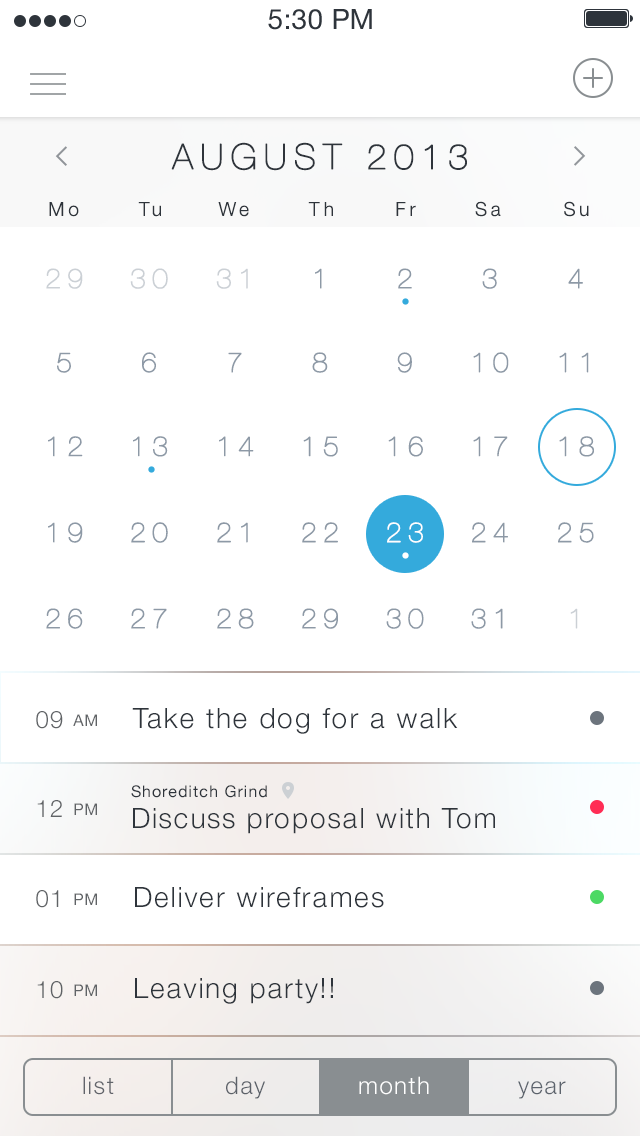
<style>
.page{position:relative;width:640px;height:1136px;background:#ffffff}
.page>*{position:absolute;margin:0}
.t1{font:35px "HelveticaNeue-UltraLight";letter-spacing:0.205em;color:#2e343b;text-transform:uppercase;font-weight:bold}
.t2{font:19.3px "HelveticaNeue-Light";letter-spacing:0.205em;color:#2e343b;text-transform:uppercase}
.t3{font:19.3px "HelveticaNeue-Light";letter-spacing:0.205em;color:#2e343b}
.t4{font:27.6px "HelveticaNeue-UltraLight";letter-spacing:0.205em;color:#cbd0d5;text-transform:uppercase;font-weight:bold}
.t5{font:27.6px "HelveticaNeue-UltraLight";letter-spacing:0.205em;color:#8d99a6;text-transform:uppercase;font-weight:bold}
.t6{font:27.6px "HelveticaNeue-UltraLight";letter-spacing:0.205em;color:#ffffff;text-transform:uppercase;font-weight:bold}
.t7{font:24px "HelveticaNeue-Light";letter-spacing:0.065em;color:#606366}
.t8{font:16px "HelveticaNeue";letter-spacing:0.065em;color:#606366;text-transform:uppercase}
.t9{font:28px "HelveticaNeue-Light";letter-spacing:0.065em;color:#2e343b}
.t10{font:16px "HelveticaNeue";letter-spacing:0.065em;color:#2e343b}
.t11{font:24px "HelveticaNeue-Light";letter-spacing:0.065em;color:#6c747d}
.t12{font:24px "HelveticaNeue-Light";letter-spacing:0.065em;color:#ffffff}
</style>
<div class="page">
<p class="t1" style="left:171px;top:142px;width:296px;height:29px">AUGUST 2013</p>
<p class="t2" style="left:49px;top:202px;width:30px;height:15px">m<span class="t3">o</span></p>
<p class="t2" style="left:138px;top:202px;width:23px;height:15px">t<span class="t3">u</span></p>
<p class="t2" style="left:218px;top:202px;width:31px;height:15px">w<span class="t3">e</span></p>
<p class="t2" style="left:308px;top:202px;width:25px;height:14px">t<span class="t3">h</span></p>
<p class="t2" style="left:396px;top:202px;width:20px;height:14px">f<span class="t3">r</span></p>
<p class="t2" style="left:475px;top:201px;width:26px;height:16px">s<span class="t3">a</span></p>
<p class="t2" style="left:564px;top:201px;width:25px;height:16px">s<span class="t3">u</span></p>
<p class="t4" style="left:46px;top:268px;width:37px;height:21px">29</p>
<p class="t4" style="left:130px;top:268px;width:38px;height:21px">30</p>
<p class="t4" style="left:216px;top:268px;width:32px;height:21px">31</p>
<p class="t5" style="left:315px;top:268px;width:7px;height:21px">1</p>
<p class="t5" style="left:398px;top:268px;width:14px;height:21px">2</p>
<p class="t5" style="left:482px;top:268px;width:15px;height:21px">3</p>
<p class="t5" style="left:568px;top:268px;width:15px;height:21px">4</p>
<p class="t5" style="left:57px;top:352px;width:14px;height:21px">5</p>
<p class="t5" style="left:142px;top:352px;width:14px;height:21px">6</p>
<p class="t5" style="left:228px;top:352px;width:14px;height:21px">7</p>
<p class="t5" style="left:312px;top:352px;width:16px;height:21px">8</p>
<p class="t5" style="left:397px;top:352px;width:15px;height:21px">9</p>
<p class="t5" style="left:473px;top:352px;width:36px;height:21px">10</p>
<p class="t5" style="left:559px;top:352px;width:30px;height:21px">11</p>
<p class="t5" style="left:48px;top:436px;width:35px;height:21px">12</p>
<p class="t5" style="left:133px;top:436px;width:35px;height:21px">13</p>
<p class="t5" style="left:219px;top:436px;width:35px;height:21px">14</p>
<p class="t5" style="left:303px;top:436px;width:35px;height:21px">15</p>
<p class="t5" style="left:388px;top:436px;width:35px;height:21px">16</p>
<p class="t5" style="left:473px;top:436px;width:35px;height:21px">17</p>
<p class="t5" style="left:559px;top:436px;width:35px;height:21px">18</p>
<p class="t5" style="left:48px;top:522px;width:35px;height:21px">19</p>
<p class="t5" style="left:131px;top:522px;width:37px;height:21px">20</p>
<p class="t5" style="left:217px;top:522px;width:31px;height:21px">21</p>
<p class="t5" style="left:302px;top:522px;width:36px;height:21px">22</p>
<p class="t6" style="left:387px;top:522px;width:36px;height:21px">23</p>
<p class="t5" style="left:472px;top:522px;width:36px;height:21px">24</p>
<p class="t5" style="left:558px;top:522px;width:36px;height:21px">25</p>
<p class="t5" style="left:46px;top:608px;width:37px;height:21px">26</p>
<p class="t5" style="left:131px;top:608px;width:36px;height:21px">27</p>
<p class="t5" style="left:217px;top:608px;width:37px;height:21px">28</p>
<p class="t5" style="left:302px;top:608px;width:36px;height:21px">29</p>
<p class="t5" style="left:386px;top:608px;width:38px;height:21px">30</p>
<p class="t5" style="left:471px;top:608px;width:32px;height:21px">31</p>
<p class="t4" style="left:570px;top:608px;width:8px;height:21px">1</p>
<p class="t7" style="left:36px;top:711px;width:61px;height:18px">09 <span class="t8">am</span></p>
<p class="t9" style="left:132px;top:708px;width:326px;height:26px">Take the dog for a walk</p>
<p class="t10" style="left:131px;top:785px;width:136px;height:13px">Shoreditch Grind</p>
<p class="t7" style="left:37px;top:800px;width:60px;height:17px">12 <span class="t8">Pm</span></p>
<p class="t9" style="left:133px;top:808px;width:362px;height:26px">Discuss proposal with Tom</p>
<p class="t7" style="left:36px;top:890px;width:61px;height:18px">01 <span class="t8">PM</span></p>
<p class="t9" style="left:135px;top:887px;width:249px;height:21px">Deliver wireframes</p>
<p class="t7" style="left:37px;top:981px;width:60px;height:18px">10 <span class="t8">PM</span></p>
<p class="t9" style="left:135px;top:978px;width:198px;height:26px">Leaving party!!</p>
<p class="t11" style="left:83px;top:1076px;width:31px;height:19px">list</p>
<p class="t11" style="left:226px;top:1076px;width:39px;height:23px">day</p>
<p class="t12" style="left:359px;top:1076px;width:70px;height:19px">month</p>
<p class="t11" style="left:518px;top:1081px;width:48px;height:18px">year</p>
</div>
